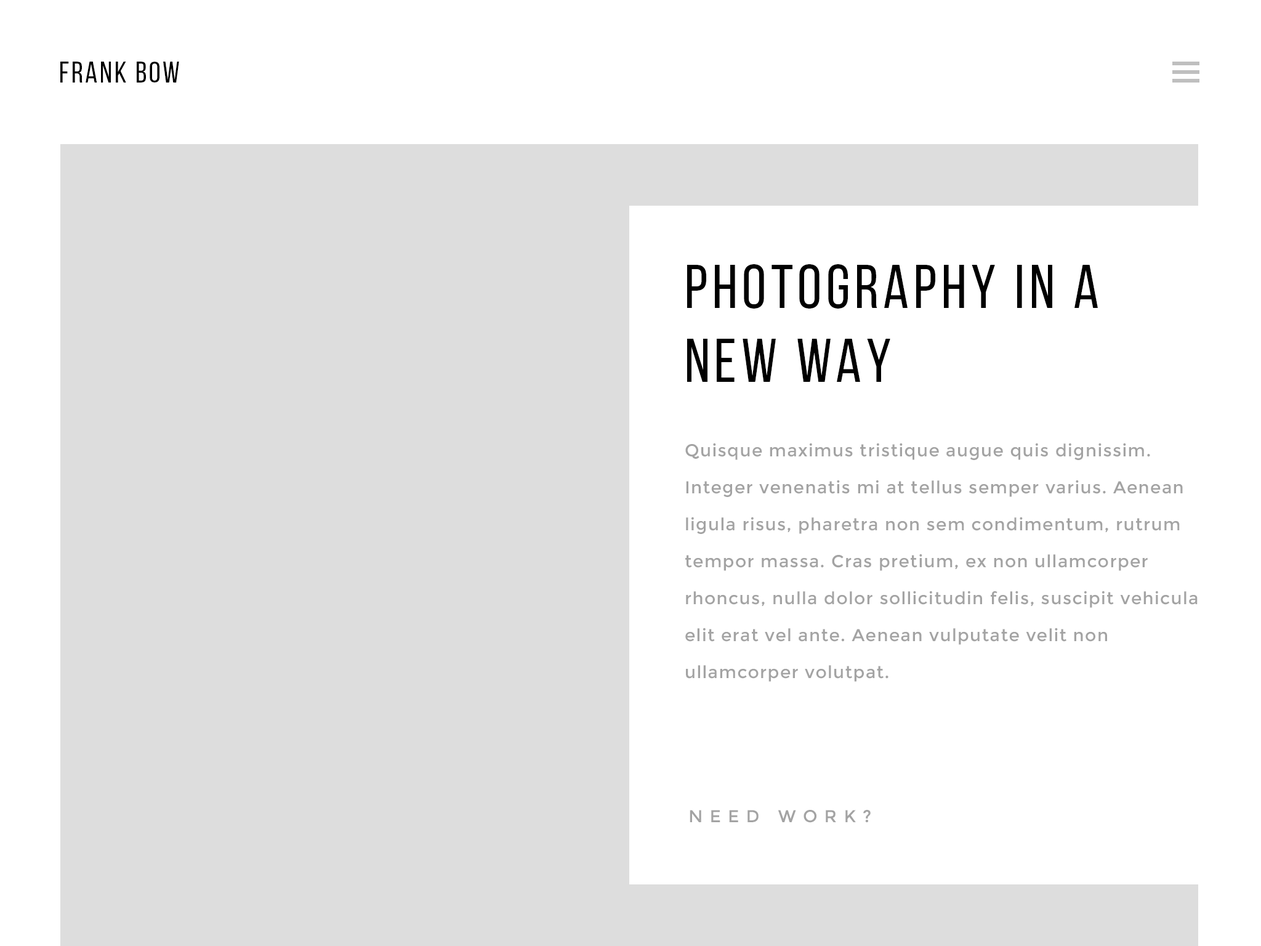
<style>
.page{position:relative;width:1261px;height:946px;background:#ffffff}
.page>*{position:absolute;margin:0}
.t1{font:29.6px "BebasNeueRegular";letter-spacing:0.075em;color:#000000;text-transform:uppercase}
.t2{font:61.6px "BebasNeueRegular";letter-spacing:0.075em;color:#000000}
.t3{font:17.2px/36.9px "Montserrat-Regular";letter-spacing:0.05em;color:#a3a3a3}
.t4{font:17.2px "Montserrat-Regular";letter-spacing:0.4em;color:#a3a3a3;text-transform:uppercase}
</style>
<div class="page">
<p class="t1" style="left:60px;top:62px;width:119px;height:21px">FRANK BOW</p>
<p class="t2" style="left:687px;top:264px;width:411px;height:118px">PHOTOGRAPHY IN A NEW WAY</p>
<p class="t3" style="left:685px;top:443px;width:513px;height:239px">Quisque maximus tristique augue quis dignissim. Integer venenatis mi at tellus semper varius. Aenean ligula risus, pharetra non sem condimentum, rutrum tempor massa. Cras pretium, ex non ullamcorper rhoncus, nulla dolor sollicitudin felis, suscipit vehicula elit erat vel ante. Aenean vulputate velit non ullamcorper volutpat.</p>
<p class="t4" style="left:690px;top:810px;width:181px;height:13px">NEED WORK?</p>
</div>
